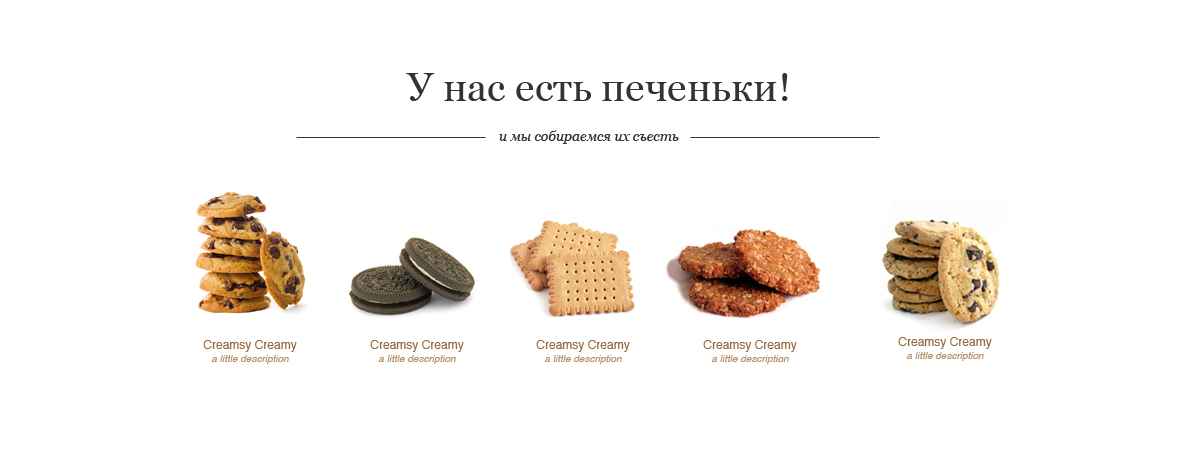
<style>
.page{position:relative;width:1200px;height:450px;background:#ffffff}
.page>*{position:absolute;margin:0}
.t1{font:40px "Georgia";color:#333333}
.t2{font:14px "Georgia-Italic";color:#333333;font-style:italic}
.t3{font:10px/13px "Helvetica-Oblique";color:#b7926c}
.t4{font:12px/13px "Helvetica";color:#946c42}
</style>
<div class="page">
<p class="t1" style="left:406px;top:73px;width:382px;height:28px">У нас есть печеньки!</p>
<p class="t2" style="left:499px;top:130px;width:180px;height:14px">и мы собираемся их съесть</p>
<p class="t3" style="left:203px;top:340px;width:94px;height:24px;text-align:center"><span class="t4">Creamsy Creamy<br></span>a little description</p>
<p class="t3" style="left:370px;top:340px;width:94px;height:24px;text-align:center"><span class="t4">Creamsy Creamy<br></span>a little description</p>
<p class="t3" style="left:536px;top:340px;width:94px;height:24px;text-align:center"><span class="t4">Creamsy Creamy<br></span>a little description</p>
<p class="t3" style="left:703px;top:340px;width:94px;height:24px;text-align:center"><span class="t4">Creamsy Creamy<br></span>a little description</p>
<p class="t3" style="left:898px;top:337px;width:94px;height:24px;text-align:center"><span class="t4">Creamsy Creamy<br></span>a little description</p>
</div>
